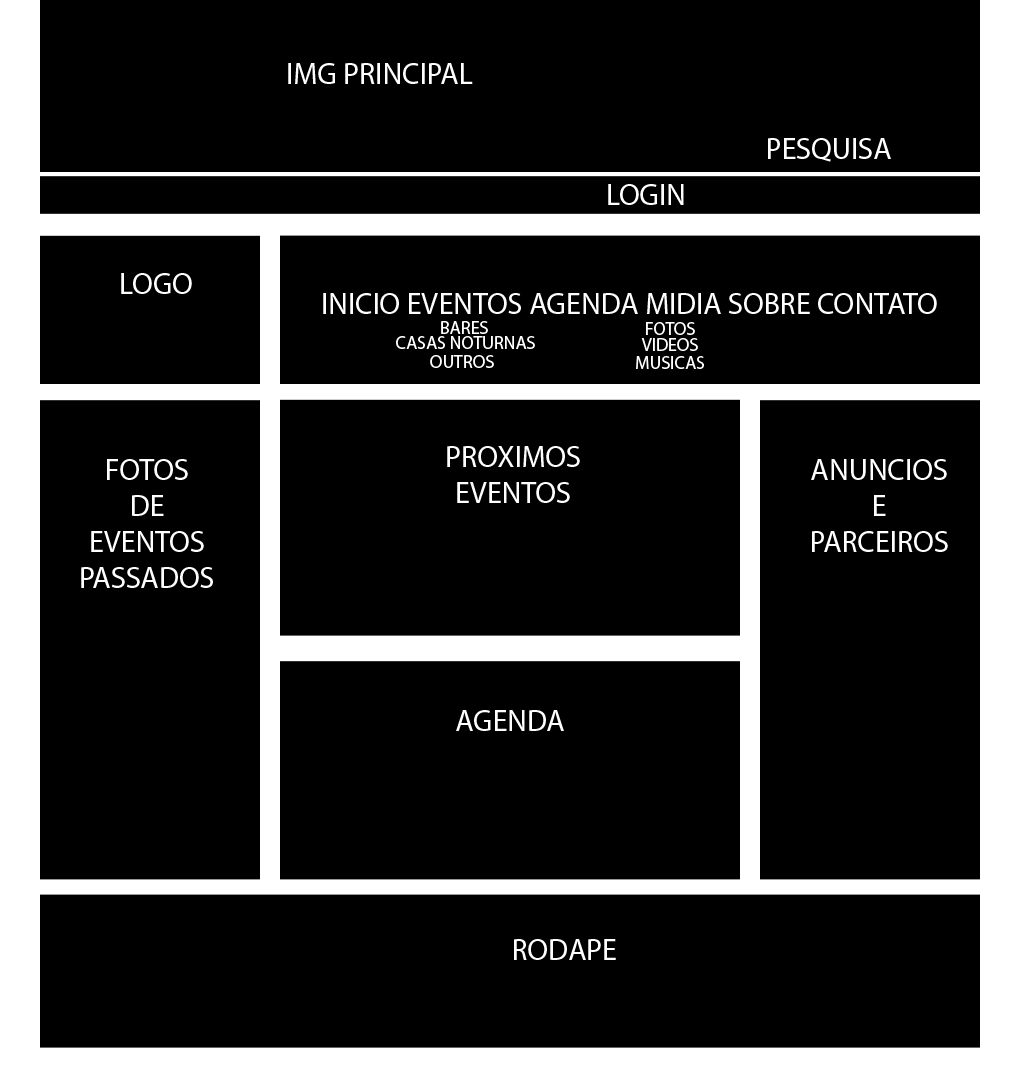
<style>
.page{position:relative;width:1020px;height:1070px;background:#000000}
.page>*{position:absolute;margin:0}
.t1{font:30px "MyriadPro-Regular";color:#ffffff}
.t2{font:30px "MyriadPro-Regular";color:#ffffff;text-transform:uppercase}
.t3{font:18px "MyriadPro-Regular";color:#ffffff;text-transform:uppercase}
</style>
<div class="page">
<p class="t1" style="left:288px;top:63px;width:185px;height:21px">IMG PRINCIPAL</p>
<p class="t1" style="left:768px;top:138px;width:123px;height:24px">PESQUISA</p>
<p class="t1" style="left:608px;top:184px;width:76px;height:21px">LOGIN</p>
<p class="t1" style="left:121px;top:273px;width:71px;height:21px">LOGO</p>
<p class="t2" style="left:323px;top:293px;width:614px;height:21px">INICIO EVENTOS AGENDA MIDIA SOBRE CONTATO</p>
<p class="t3" style="left:441px;top:321px;width:47px;height:13px">bARES</p>
<p class="t3" style="left:646px;top:322px;width:49px;height:13px">FOTOS</p>
<p class="t3" style="left:396px;top:336px;width:139px;height:13px">cASAS NOTURNAS</p>
<p class="t3" style="left:641px;top:338px;width:57px;height:13px">VIDEOS</p>
<p class="t3" style="left:430px;top:355px;width:64px;height:13px">OUTROS</p>
<p class="t3" style="left:636px;top:356px;width:68px;height:13px">MUSICAS</p>
<p class="t2" style="left:447px;top:446px;width:133px;height:57px;text-align:center">PROXIMOS <br>EVENTOS</p>
<p class="t2" style="left:81px;top:459px;width:132px;height:129px;text-align:center">FOTOS<br>DE<br>EVENTOS<br>PASSADOS</p>
<p class="t2" style="left:811px;top:459px;width:137px;height:93px;text-align:center">ANUNCIOS<br>E<br>PARCEIROS</p>
<p class="t2" style="left:456px;top:710px;width:108px;height:21px">AGENDA</p>
<p class="t2" style="left:514px;top:939px;width:102px;height:21px">RODAPE</p>
</div>
